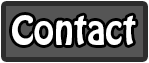
<style>
.page{position:relative;width:149px;height:63px;background:#555555}
.page>*{position:absolute;margin:0}
.t1{font:36px "HoboStd";color:#ffffff}
</style>
<div class="page">
<p class="t1" style="left:12px;top:15px;width:124px;height:30px">Contact</p>
</div>
